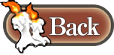
<style>
.page{position:relative;width:114px;height:55px;background:#ffffff}
.page>*{position:absolute;margin:0}
.t1{font:24px "RyuminPro-ExBold";letter-spacing:-0.08em;color:#ffffff}
</style>
<div class="page">
<p class="t1" style="left:49px;top:17px;width:51px;height:19px">Back</p>
</div>
